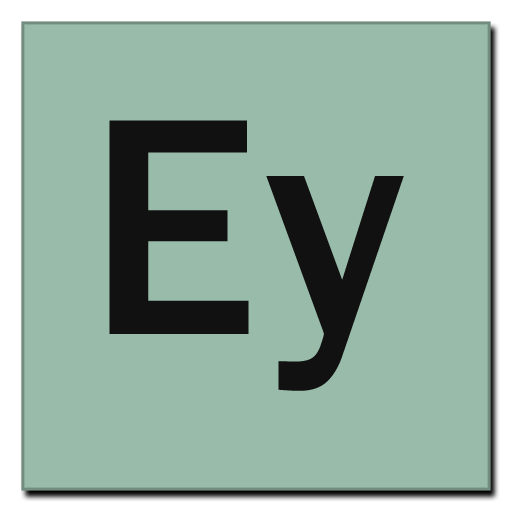
<style>
.page{position:relative;width:512px;height:512px;background:#99bbaa}
.page>*{position:absolute;margin:0}
.t1{font:320px "FranklinGothic-Medium";letter-spacing:0.02em;color:#111111}
</style>
<div class="page">
<p class="t1" style="left:109px;top:120px;width:295px;height:271px">Ey</p>
</div>
